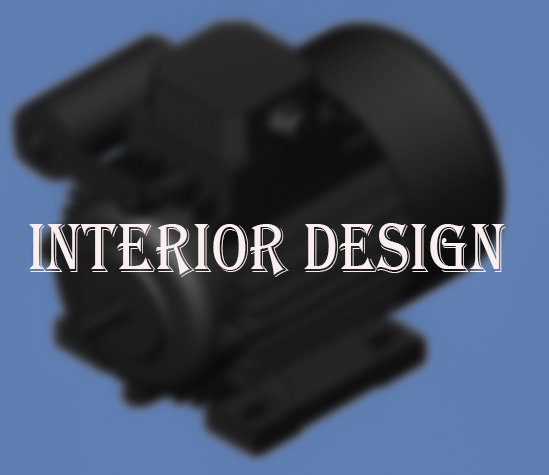
<style>
.page{position:relative;width:549px;height:475px}
.page>*{position:absolute;margin:0}
.t1{font:71.6px "Algerian";color:#faeeee;scale:0.84 1}
</style>
<div class="page">
<p class="t1" style="left:29px;top:223px;width:477px;height:54px">INTERIOR DESIGN</p>
</div>
